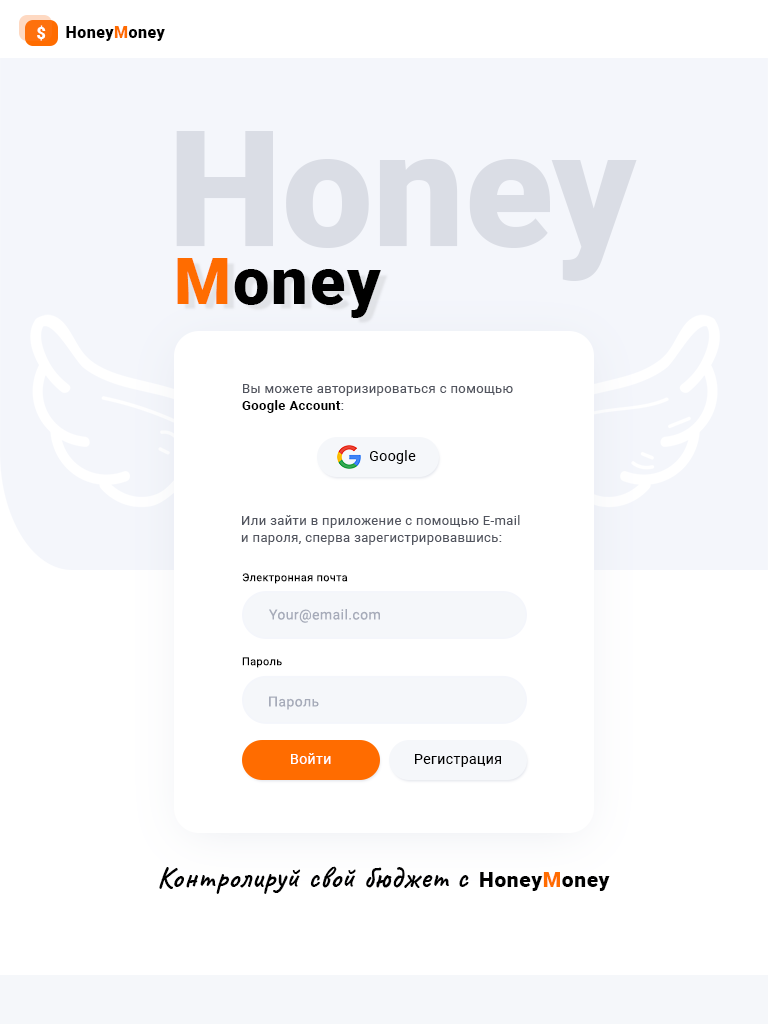
<style>
.page{position:relative;width:768px;height:1024px;background:#ffffff}
.page>*{position:absolute;margin:0}
.t1{font:16px "Roboto-Black";letter-spacing:0.03em;color:#ffffff}
.t2{font:16px "Roboto-Black";letter-spacing:0.03em;color:#000000}
.t3{font:16px "Roboto-Black";letter-spacing:0.03em;color:#ff6c00}
.t4{font:65px "Roboto-Black";letter-spacing:0.03em;color:#000000}
.t5{font:65px "Roboto-Black";letter-spacing:0.03em;color:#ff6c00}
.t6{font:13px/17px "Roboto-Regular";letter-spacing:0.03em;color:#52555f}
.t7{font:13px/17px "Roboto-Bold";letter-spacing:0.03em;color:#000000}
.t8{font:14px "Roboto-Regular";letter-spacing:0.03em;color:#000000}
.t9{font:11px "Roboto-Regular";letter-spacing:0.03em;color:#000000}
.t10{font:14px "Roboto-Regular";letter-spacing:0.03em;color:#a6abb9}
.t11{font:14px "Roboto-Regular";letter-spacing:0.03em;color:#ffffff}
.t12{font:30px "Caveat-Bold";letter-spacing:0.03em;color:#000000}
.t13{font:21px "Roboto-Black";letter-spacing:0.03em;color:#000000}
.t14{font:21px "Roboto-Black";letter-spacing:0.03em;color:#ff6c00}
</style>
<div class="page">
<p class="t1" style="left:37px;top:25px;width:9px;height:16px">$</p>
<p class="t2" style="left:66px;top:26px;width:99px;height:15px">Honey<span class="t3">M</span>oney</p>
<p class="t4" style="left:177px;top:258px;width:204px;height:60px"><span class="t5">M</span>oney</p>
<p class="t6" style="left:242px;top:384px;width:271px;height:29px">Вы можете авторизироваться с помощью <br><span class="t7">Google Account</span>:</p>
<p class="t8" style="left:370px;top:450px;width:46px;height:14px">Google</p>
<p class="t6" style="left:241px;top:515px;width:279px;height:30px">Или зайти в приложение с помощью E-mail <br>и пароля, сперва зарегистрировавшись:</p>
<p class="t9" style="left:242px;top:573px;width:106px;height:11px">Электронная почта</p>
<p class="t10" style="left:269px;top:609px;width:111px;height:14px">Your@email.com</p>
<p class="t9" style="left:242px;top:657px;width:40px;height:11px">Пароль</p>
<p class="t10" style="left:269px;top:696px;width:50px;height:14px">Пароль</p>
<p class="t11" style="left:291px;top:753px;width:40px;height:11px">Войти</p>
<p class="t8" style="left:415px;top:754px;width:86px;height:13px">Регистрация</p>
<p class="t12" style="left:159px;top:866px;width:310px;height:28px">Контролируй свой бюджет с</p>
<p class="t13" style="left:480px;top:872px;width:130px;height:19px">Honey<span class="t14">M</span>oney</p>
</div>
